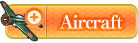
<style>
.page{position:relative;width:138px;height:43px;background:#ffffff}
.page>*{position:absolute;margin:0}
.t1{font:18px "RyuminPro-ExBold";letter-spacing:-0.08em;color:#ffffff}
</style>
<div class="page">
<p class="t1" style="left:59px;top:15px;width:64px;height:14px">Aircraft</p>
</div>
